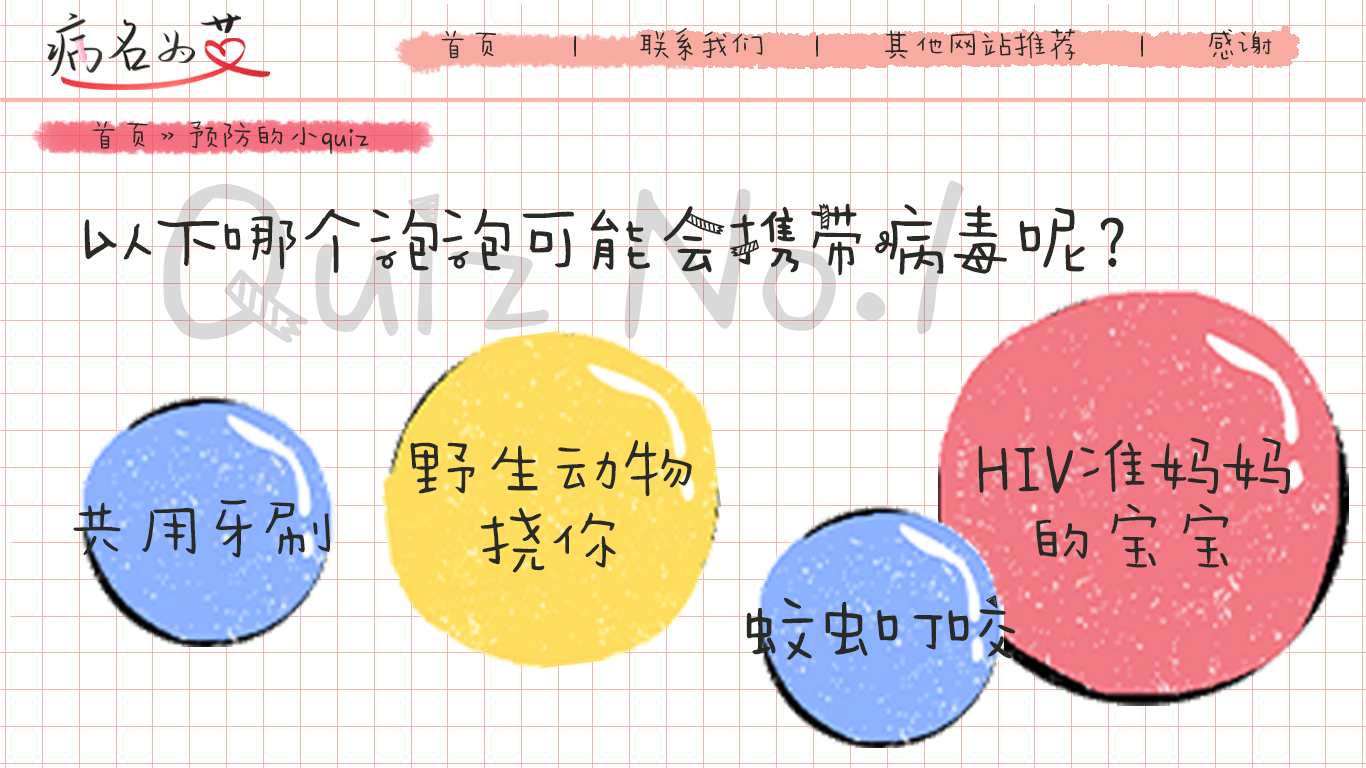
<style>
.page{position:relative;width:1366px;height:768px;background:#ffffff}
.page>*{position:absolute;margin:0}
.t1{font:33.3px "AaWanWan";color:#282a26}
.t2{font:72px "AaPaperTape";color:#282a26}
.t3{font:72px/72px "AaWanWan";color:#282a26}
.t4{font:72px "AaWanWan";color:#282a26}
</style>
<div class="page">
<p class="t1" style="left:441px;top:27px;width:831px;height:34px">首页       |      联系我们     |      其他网站推荐      |      感谢</p>
<p class="t1" style="left:92px;top:121px;width:277px;height:34px">首页》预防的小quiz</p>
<p class="t2" style="left:84px;top:203px;width:1040px;height:73px">以下哪个泡泡可能会携带病毒呢？</p>
<p class="t3" style="left:978px;top:437px;width:312px;height:131px;text-align:center">HIV准妈妈<br>的宝宝</p>
<p class="t3" style="left:410px;top:439px;width:282px;height:134px;text-align:center">野生动物<br>挠你</p>
<p class="t4" style="left:73px;top:500px;width:257px;height:58px">共用牙刷</p>
<p class="t2" style="left:746px;top:595px;width:270px;height:65px">蚊虫叮咬</p>
</div>
